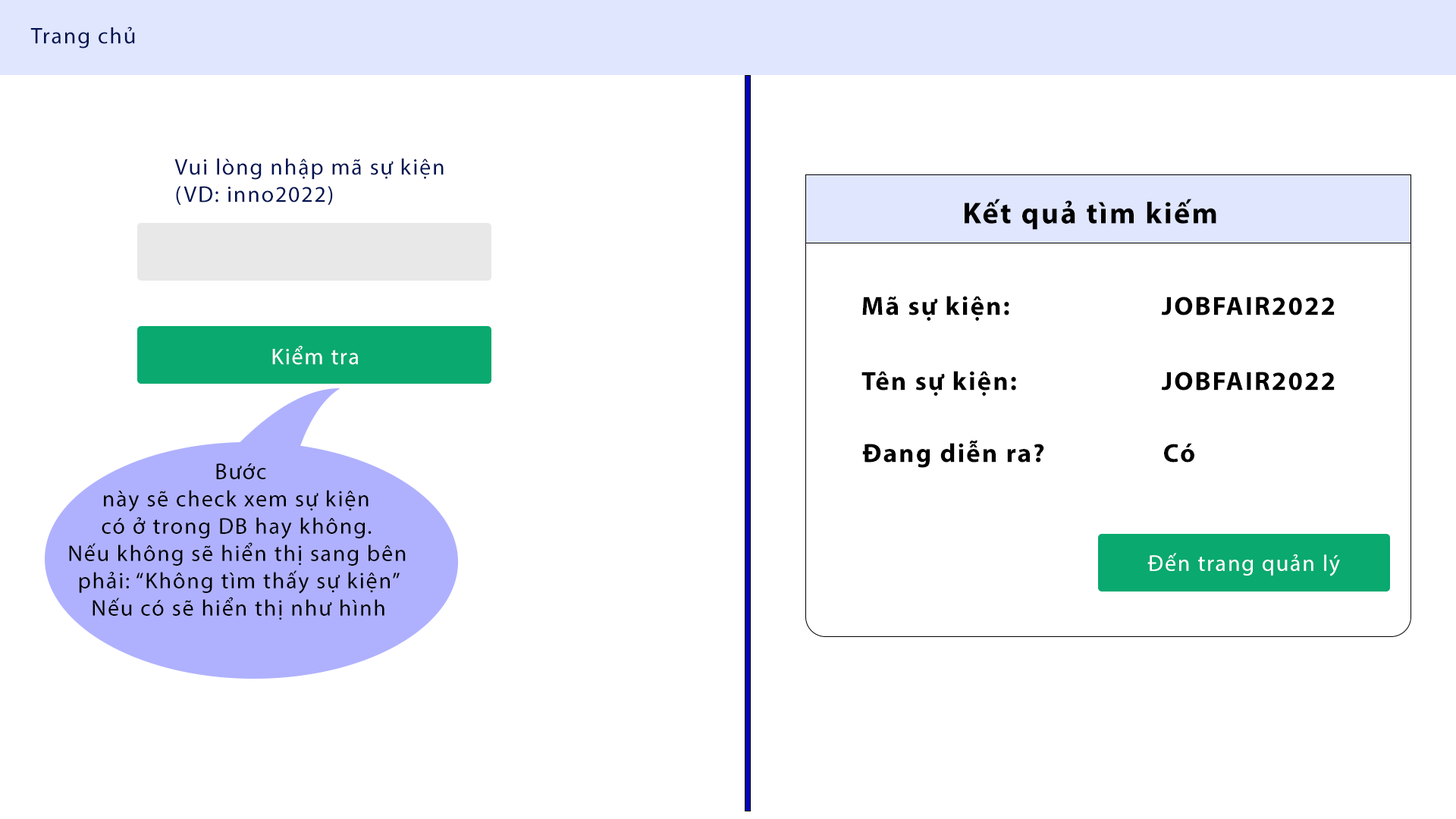
<style>
.page{position:relative;width:1456px;height:819px;background:#ffffff}
.page>*{position:absolute;margin:0}
.t1{font:22.7px "MyriadPro-Regular";letter-spacing:0.06em;color:#001352}
.t2{font:30.3px "MyriadPro-Bold";letter-spacing:0.06em;color:#000000}
.t3{font:26.5px "MyriadPro-Bold";letter-spacing:0.06em;color:#000000}
.t4{font:22.7px "MyriadPro-Regular";letter-spacing:0.06em;color:#ffffff}
.t5{font:22.7px "MyriadPro-Regular";letter-spacing:0.06em;color:#000000}
</style>
<div class="page">
<p class="t1" style="left:30px;top:27px;width:105px;height:22px">Trang chủ</p>
<p class="t1" style="left:174px;top:158px;width:270px;height:47px;text-align:justify">Vui lòng nhập mã sự kiện<br>(VD: inno2022)</p>
<p class="t2" style="left:965px;top:199px;width:251px;height:31px">Kết quả tìm kiếm</p>
<p class="t3" style="left:862px;top:296px;width:473px;height:25px">Mã sự kiện:      JOBFAIR2022</p>
<p class="t4" style="left:272px;top:346px;width:86px;height:19px">Kiểm tra</p>
<p class="t3" style="left:861px;top:371px;width:474px;height:25px">Tên sự kiện:      JOBFAIR2022</p>
<p class="t3" style="left:862px;top:440px;width:332px;height:28px">Đang diễn ra?     Có</p>
<p class="t5" style="left:69px;top:463px;width:337px;height:157px;text-align:center">Bước này sẽ check xem sự kiện có ở trong DB hay không.<br>Nếu không sẽ hiển thị sang bên phải: “Không tìm thấy sự kiện”<br>Nếu có sẽ hiển thị như hình</p>
<p class="t4" style="left:1147px;top:553px;width:193px;height:23px">Đến trang quản lý</p>
</div>
